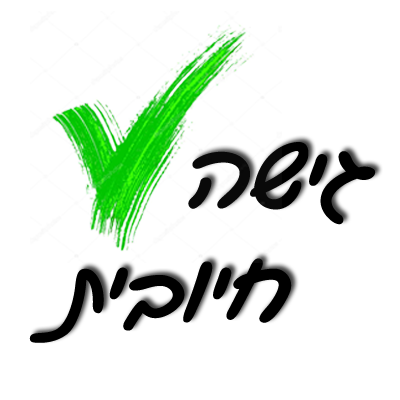
<style>
.page{position:relative;width:400px;height:400px;background:#ffffff}
.page>*{position:absolute;margin:0}
.t1{font:94.5px "GveretLevinAlefAlefAlef-Regular";color:#000000}
</style>
<div class="page">
<p class="t1" style="left:29px;top:142px;width:347px;height:201px">גישה <br>   חיובית</p>
</div>
